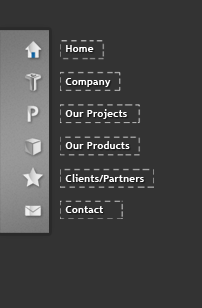
<style>
.page{position:relative;width:202px;height:308px;background:#333333}
.page>*{position:absolute;margin:0}
.t1{font:10.5px "TrebuchetMS-Bold";color:#ffffff}
</style>
<div class="page">
<p class="t1" style="left:65px;top:45px;width:79px;height:168px">Home<br><br>Company<br><br>Our Projects<br><br>Our Products<br><br>Clients/Partners<br><br>Contact</p>
</div>
